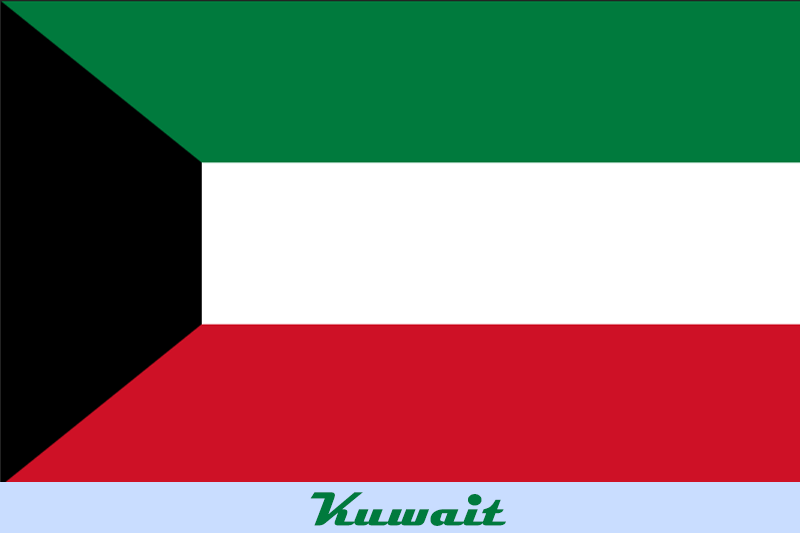
<style>
.page{position:relative;width:800px;height:533px;background:#007a3d}
.page>*{position:absolute;margin:0}
.t1{font:48px "Magneto-Bold";color:#007a3d;scale:1.08 1}
</style>
<div class="page">
<p class="t1" style="left:310px;top:492px;width:196px;height:34px">Kuwait</p>
</div>
